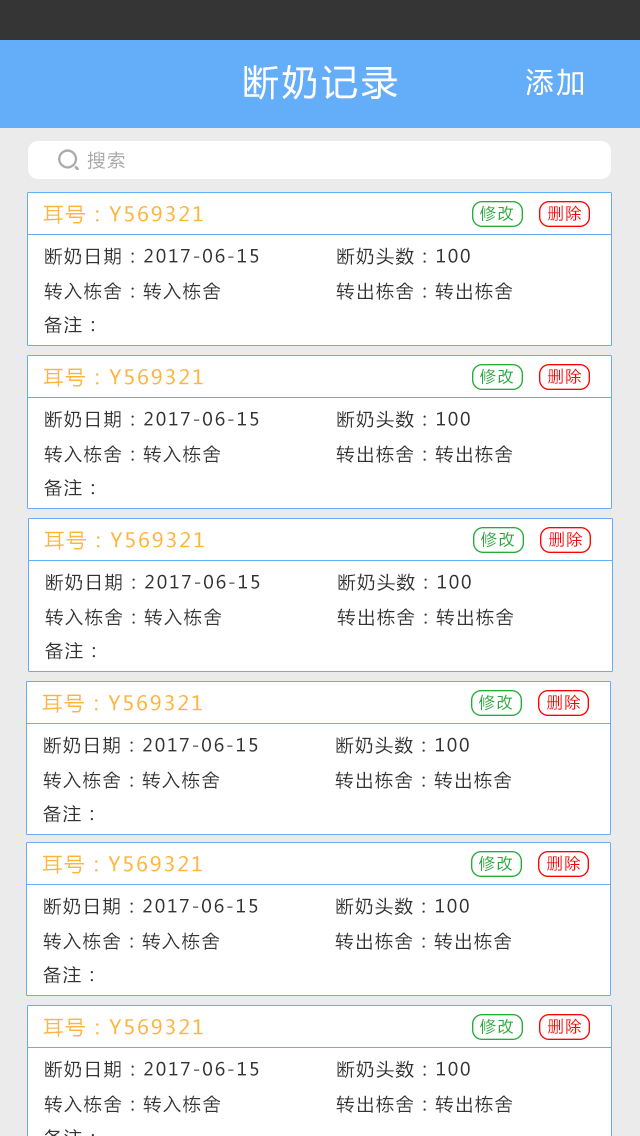
<style>
.page{position:relative;width:640px;height:1136px;background:#ffffff}
.page>*{position:absolute;margin:0}
.t1{font:36px "MicrosoftYaHei";letter-spacing:0.1em;color:#ffffff}
.t2{font:28px "MicrosoftYaHei";letter-spacing:0.1em;color:#ffffff}
.t3{font:18px "MicrosoftYaHei";letter-spacing:0.1em;color:#aaaaaa}
.t4{font:20px "MicrosoftYaHei";letter-spacing:0.1em;color:#ffb537}
.t5{font:16px "MicrosoftYaHei";letter-spacing:0.1em;color:#22ac38}
.t6{font:16px "MicrosoftYaHei";letter-spacing:0.1em;color:#ff0000}
.t7{font:18px "MicrosoftYaHei";letter-spacing:0.1em;color:#333333}
</style>
<div class="page">
<p class="t1" style="left:244px;top:65px;width:153px;height:35px">断奶记录</p>
<p class="t2" style="left:526px;top:68px;width:57px;height:28px">添加</p>
<p class="t3" style="left:87px;top:151px;width:38px;height:18px">搜索</p>
<p class="t4" style="left:43px;top:205px;width:160px;height:19px">耳号：Y569321</p>
<p class="t5" style="left:480px;top:205px;width:34px;height:17px">修改</p>
<p class="t6" style="left:548px;top:205px;width:34px;height:16px">删除</p>
<p class="t7" style="left:45px;top:247px;width:214px;height:18px">断奶日期：2017-06-15</p>
<p class="t7" style="left:337px;top:247px;width:133px;height:18px">断奶头数：100</p>
<p class="t7" style="left:44px;top:282px;width:177px;height:18px">转入栋舍：转入栋舍</p>
<p class="t7" style="left:336px;top:282px;width:177px;height:18px">转出栋舍：转出栋舍</p>
<p class="t7" style="left:44px;top:316px;width:50px;height:18px">备注：</p>
<p class="t4" style="left:43px;top:368px;width:160px;height:19px">耳号：Y569321</p>
<p class="t5" style="left:480px;top:368px;width:34px;height:17px">修改</p>
<p class="t6" style="left:548px;top:368px;width:34px;height:16px">删除</p>
<p class="t7" style="left:45px;top:410px;width:214px;height:18px">断奶日期：2017-06-15</p>
<p class="t7" style="left:337px;top:410px;width:133px;height:18px">断奶头数：100</p>
<p class="t7" style="left:44px;top:445px;width:177px;height:18px">转入栋舍：转入栋舍</p>
<p class="t7" style="left:336px;top:445px;width:177px;height:18px">转出栋舍：转出栋舍</p>
<p class="t7" style="left:44px;top:479px;width:50px;height:18px">备注：</p>
<p class="t4" style="left:44px;top:531px;width:160px;height:19px">耳号：Y569321</p>
<p class="t5" style="left:481px;top:531px;width:34px;height:17px">修改</p>
<p class="t6" style="left:549px;top:531px;width:34px;height:16px">删除</p>
<p class="t7" style="left:46px;top:573px;width:214px;height:18px">断奶日期：2017-06-15</p>
<p class="t7" style="left:338px;top:573px;width:133px;height:18px">断奶头数：100</p>
<p class="t7" style="left:45px;top:608px;width:177px;height:18px">转入栋舍：转入栋舍</p>
<p class="t7" style="left:337px;top:608px;width:177px;height:18px">转出栋舍：转出栋舍</p>
<p class="t7" style="left:45px;top:642px;width:50px;height:18px">备注：</p>
<p class="t4" style="left:42px;top:694px;width:160px;height:19px">耳号：Y569321</p>
<p class="t5" style="left:479px;top:694px;width:34px;height:17px">修改</p>
<p class="t6" style="left:547px;top:694px;width:34px;height:16px">删除</p>
<p class="t7" style="left:44px;top:736px;width:214px;height:18px">断奶日期：2017-06-15</p>
<p class="t7" style="left:336px;top:736px;width:133px;height:18px">断奶头数：100</p>
<p class="t7" style="left:43px;top:771px;width:177px;height:18px">转入栋舍：转入栋舍</p>
<p class="t7" style="left:335px;top:771px;width:177px;height:18px">转出栋舍：转出栋舍</p>
<p class="t7" style="left:43px;top:805px;width:50px;height:18px">备注：</p>
<p class="t4" style="left:42px;top:855px;width:160px;height:19px">耳号：Y569321</p>
<p class="t5" style="left:479px;top:855px;width:34px;height:17px">修改</p>
<p class="t6" style="left:547px;top:855px;width:34px;height:16px">删除</p>
<p class="t7" style="left:44px;top:897px;width:214px;height:18px">断奶日期：2017-06-15</p>
<p class="t7" style="left:336px;top:897px;width:133px;height:18px">断奶头数：100</p>
<p class="t7" style="left:43px;top:932px;width:177px;height:18px">转入栋舍：转入栋舍</p>
<p class="t7" style="left:335px;top:932px;width:177px;height:18px">转出栋舍：转出栋舍</p>
<p class="t7" style="left:43px;top:966px;width:50px;height:18px">备注：</p>
<p class="t4" style="left:43px;top:1018px;width:160px;height:19px">耳号：Y569321</p>
<p class="t5" style="left:480px;top:1018px;width:34px;height:17px">修改</p>
<p class="t6" style="left:548px;top:1018px;width:34px;height:16px">删除</p>
<p class="t7" style="left:45px;top:1060px;width:214px;height:18px">断奶日期：2017-06-15</p>
<p class="t7" style="left:337px;top:1060px;width:133px;height:18px">断奶头数：100</p>
<p class="t7" style="left:44px;top:1095px;width:177px;height:18px">转入栋舍：转入栋舍</p>
<p class="t7" style="left:336px;top:1095px;width:177px;height:18px">转出栋舍：转出栋舍</p>
</div>
